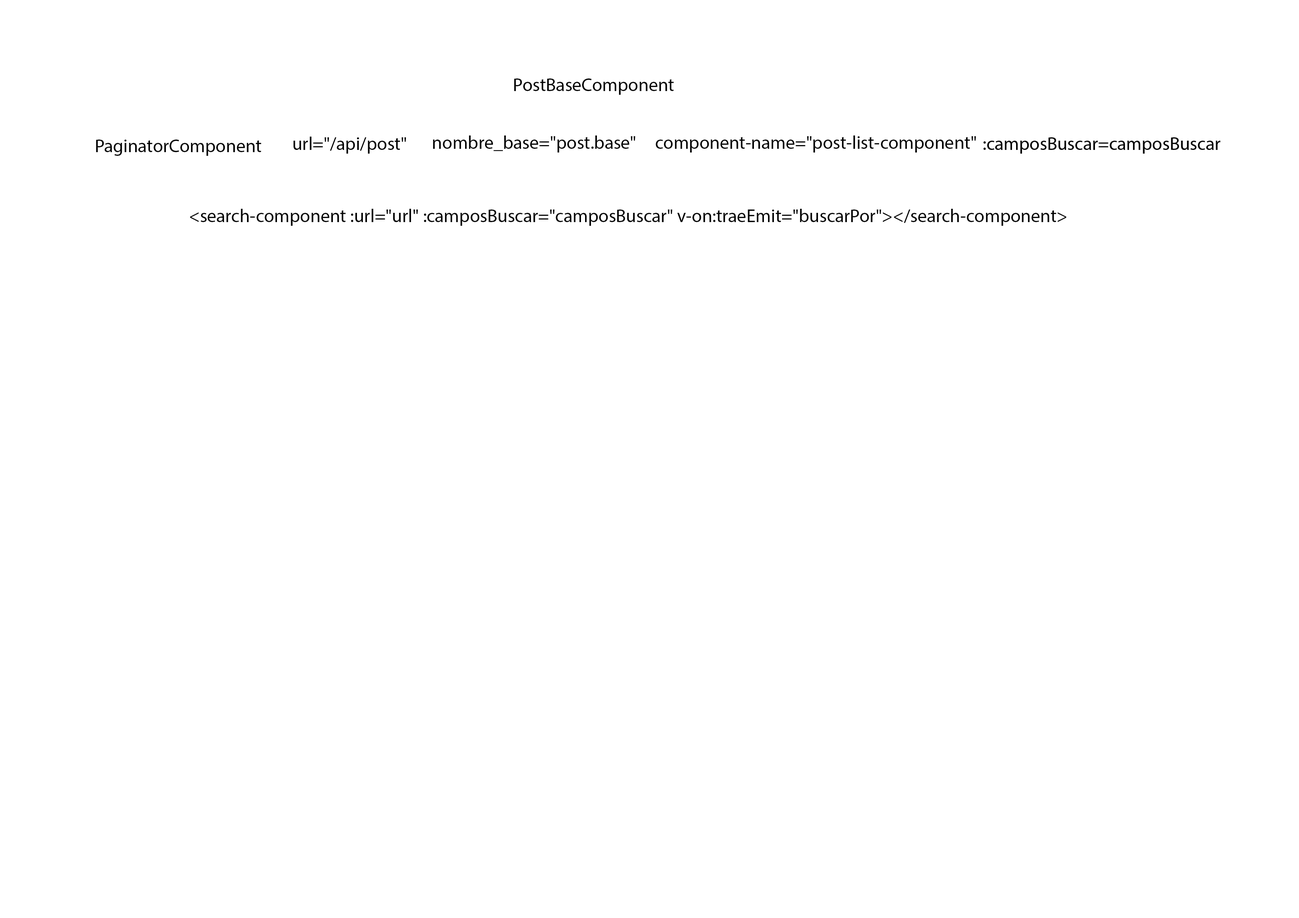
<style>
.page{position:relative;width:1299px;height:918px;background:#ffffff}
.page>*{position:absolute;margin:0}
.t1{font:18.5px "MyriadPro-Regular";color:#000000}
</style>
<div class="page">
<p class="t1" style="left:514px;top:78px;width:160px;height:17px">PostBaseComponent</p>
<p class="t1" style="left:293px;top:137px;width:113px;height:17px">url="/api/post"</p>
<p class="t1" style="left:433px;top:136px;width:202px;height:17px">nombre_base="post.base"</p>
<p class="t1" style="left:656px;top:136px;width:320px;height:17px">component-name="post-list-component"</p>
<p class="t1" style="left:96px;top:140px;width:165px;height:16px">PaginatorComponent</p>
<p class="t1" style="left:190px;top:209px;width:876px;height:17px">&lt;search-component :url="url" :camposBuscar="camposBuscar" v-on:traeEmit="buscarPor"&gt;&lt;/search-component&gt;</p>
</div>
